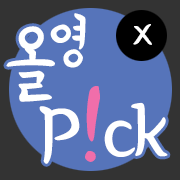
<style>
.page{position:relative;width:180px;height:180px;background:#5674ba}
.page>*{position:absolute;margin:0}
.t1{font:60px "BMYEONSUNG";letter-spacing:-0.05em;color:#ffffff}
.t2{font:86px "BMYEONSUNG";letter-spacing:-0.05em;color:#ffffff}
.t3{font:42.5px "BMYEONSUNG";letter-spacing:-0.05em;color:#ffffff}
.t4{font:76.6px "BMYEONSUNG";letter-spacing:-0.05em;color:#ffffff}
.t5{font:84.3px "BMYEONSUNG";letter-spacing:-0.05em;color:#ffffff}
.t6{font:94.5px "BMYEONSUNG";letter-spacing:-0.05em;color:#f06eaa}
</style>
<div class="page">
<p class="t1" style="left:50px;top:13px;width:36px;height:55px">영</p>
<p class="t2" style="left:6px;top:26px;width:49px;height:76px">올</p>
<p class="t3" style="left:133px;top:24px;width:19px;height:21px">x</p>
<p class="t4" style="left:39px;top:86px;width:129px;height:78px"><span class="t5">P</span><span class="t6">!</span>ck</p>
</div>
